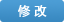
<style>
.page{position:relative;width:64px;height:22px}
.page>*{position:absolute;margin:0}
.t1{font:12px "MicrosoftYaHei";color:#ffffff;font-weight:bold}
</style>
<div class="page">
<p class="t1" style="left:18px;top:5px;width:29px;height:12px">修 改</p>
</div>
